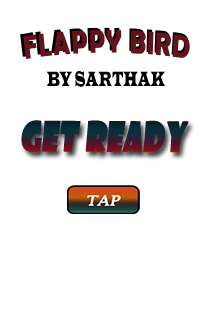
<style>
.page{position:relative;width:210px;height:320px;background:#ffffff}
.page>*{position:absolute;margin:0}
.t1{font:33.2px "BerlinSansFBDemi-Bold";scale:0.8 1}
.t2{font:33.2px "BerlinSansFBDemi-Bold";color:#63141b;scale:0.79 1}
.t3{font:21.4px "LatinWide";color:#000000;scale:0.44 1}
.t4{font:39.4px "ShowcardGothic-Reg";font-variant:small-caps;font-weight:bold;font-style:italic;scale:0.75 1}
</style>
<div class="page">
<p class="t1" style="left:20px;top:27px;width:169px;height:30px">FLAPPY BIRD</p>
<p class="t2" style="left:23px;top:29px;width:167px;height:30px">FLAPPY BIRD</p>
<p class="t3" style="left:46px;top:71px;width:119px;height:16px">BY SARTHAK</p>
<p class="t4" style="left:21px;top:120px;width:168px;height:34px">GET READY</p>
</div>
